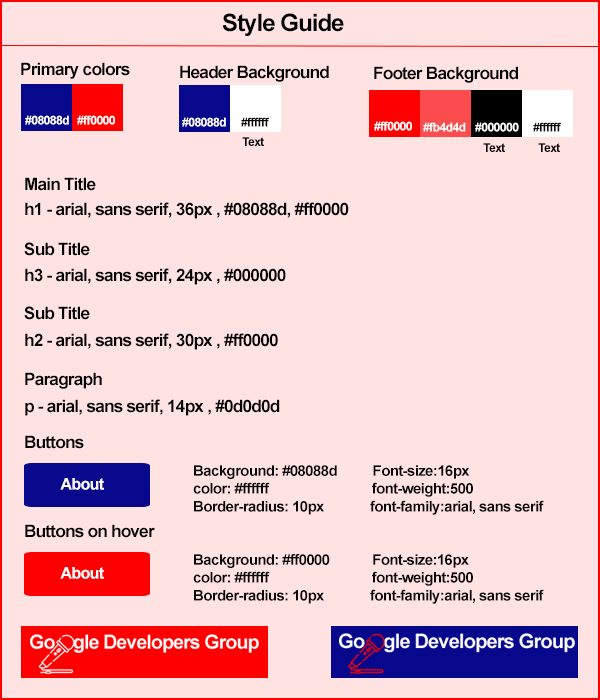
<style>
.page{position:relative;width:600px;height:700px;background:#ffe3e3}
.page>*{position:absolute;margin:0}
.t1{font:24px "Arial-BoldMT";letter-spacing:-0.04em;color:#000000}
.t2{font:17px "Arial-BoldMT";letter-spacing:-0.04em;color:#000000}
.t3{font:12px "Arial-BoldMT";letter-spacing:-0.04em;color:#ffffff}
.t4{font:12px "Arial-BoldMT";letter-spacing:-0.04em;color:#0b0b0b}
.t5{font:12px "Arial-BoldMT";letter-spacing:-0.04em;color:#000000}
.t6{font:14.9px "Arial-BoldMT";letter-spacing:-0.04em;color:#080808}
.t7{font:16px "Arial-BoldMT";letter-spacing:-0.04em;color:#ffffff}
</style>
<div class="page">
<p class="t1" style="left:222px;top:13px;width:122px;height:23px">Style Guide</p>
<p class="t2" style="left:21px;top:62px;width:109px;height:17px">Primary colors</p>
<p class="t2" style="left:180px;top:65px;width:149px;height:17px">Header Background</p>
<p class="t2" style="left:374px;top:66px;width:144px;height:17px">Footer Background</p>
<p class="t3" style="left:25px;top:115px;width:44px;height:10px">#08088d</p>
<p class="t3" style="left:77px;top:115px;width:38px;height:10px">#ff0000</p>
<p class="t3" style="left:182px;top:117px;width:44px;height:10px">#08088d</p>
<p class="t4" style="left:241px;top:117px;width:28px;height:10px">#ffffff</p>
<p class="t3" style="left:374px;top:121px;width:38px;height:10px">#ff0000</p>
<p class="t3" style="left:423px;top:122px;width:43px;height:10px">#fb4d4d</p>
<p class="t3" style="left:475px;top:122px;width:44px;height:10px">#000000</p>
<p class="t4" style="left:533px;top:122px;width:28px;height:10px">#ffffff</p>
<p class="t5" style="left:242px;top:137px;width:22px;height:9px">Text</p>
<p class="t5" style="left:483px;top:143px;width:22px;height:9px">Text</p>
<p class="t5" style="left:538px;top:143px;width:22px;height:9px">Text</p>
<p class="t2" style="left:25px;top:177px;width:71px;height:14px">Main Title</p>
<p class="t2" style="left:25px;top:202px;width:324px;height:17px">h1 - arial, sans serif, 36px , #08088d, #ff0000</p>
<p class="t2" style="left:24px;top:242px;width:66px;height:14px">Sub Title</p>
<p class="t2" style="left:25px;top:268px;width:261px;height:17px">h3 - arial, sans serif, 24px , #000000</p>
<p class="t2" style="left:24px;top:306px;width:66px;height:14px">Sub Title</p>
<p class="t2" style="left:25px;top:333px;width:253px;height:17px">h2 - arial, sans serif, 30px , #ff0000</p>
<p class="t2" style="left:25px;top:372px;width:77px;height:17px">Paragraph</p>
<p class="t2" style="left:25px;top:399px;width:255px;height:17px">p - arial, sans serif, 14px , #0d0d0d</p>
<p class="t2" style="left:25px;top:435px;width:59px;height:14px">Buttons</p>
<p class="t6" style="left:193px;top:465px;width:351px;height:50px">Background: #08088d          Font-size:16px<br>color: #ffffff                             font-weight:500<br>Border-radius: 10px             font-family:arial, sans serif</p>
<p class="t7" style="left:60px;top:478px;width:44px;height:12px">About</p>
<p class="t2" style="left:25px;top:524px;width:130px;height:14px">Buttons on hover</p>
<p class="t6" style="left:193px;top:554px;width:351px;height:50px">Background: #ff0000            Font-size:16px<br>color: #ffffff                             font-weight:500<br>Border-radius: 10px             font-family:arial, sans serif</p>
<p class="t7" style="left:60px;top:567px;width:44px;height:12px">About</p>
</div>
